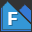
<style>
.page{position:relative;width:32px;height:32px;background:#3497d6}
.page>*{position:absolute;margin:0}
.t1{font:18px "SegoeUI-Bold";color:#fefeff;scale:1.2 1}
</style>
<div class="page">
<p class="t1" style="left:8px;top:12px;width:10px;height:13px">F</p>
</div>
